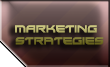
<style>
.page{position:relative;width:110px;height:67px}
.page>*{position:absolute;margin:0}
.t1{font:10px "Xirod-Regular";scale:0.96 1}
.t2{font:9.1px "Xirod-Regular";scale:0.96 1}
</style>
<div class="page">
<p class="t1" style="left:15px;top:25px;width:89px;height:20px"><span class="t2">  </span>MARKETING <br>  STRATEGIES</p>
</div>
